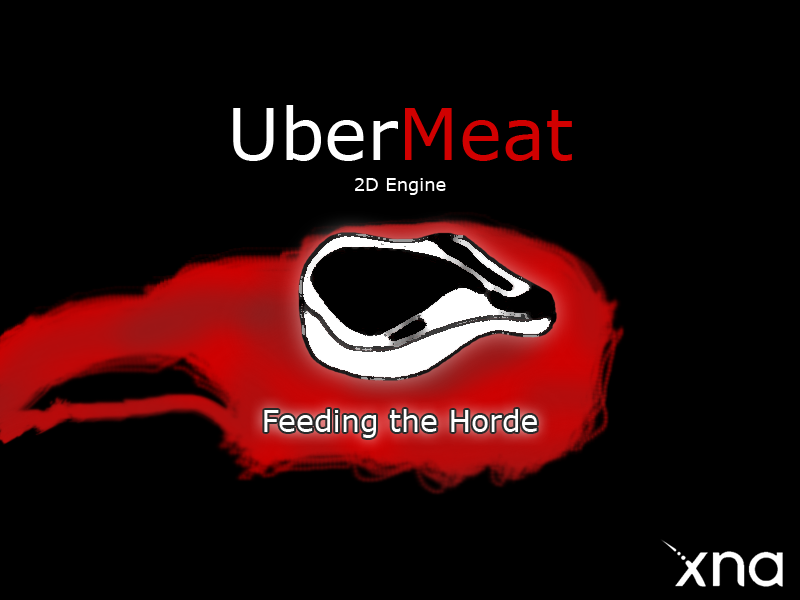
<style>
.page{position:relative;width:800px;height:600px;background:#000000}
.page>*{position:absolute;margin:0}
.t1{font:72px "Verdana";color:#ffffff}
.t2{font:72px "Verdana";color:#d10000}
.t3{font:18px "Verdana";color:#ffffff}
.t4{font:30px "Verdana";color:#ffffff}
</style>
<div class="page">
<p class="t1" style="left:233px;top:105px;width:339px;height:56px">Uber<span class="t2">Meat</span></p>
<p class="t3" style="left:355px;top:178px;width:91px;height:17px">2D Engine</p>
<p class="t4" style="left:264px;top:409px;width:273px;height:29px">Feeding the Horde</p>
</div>
